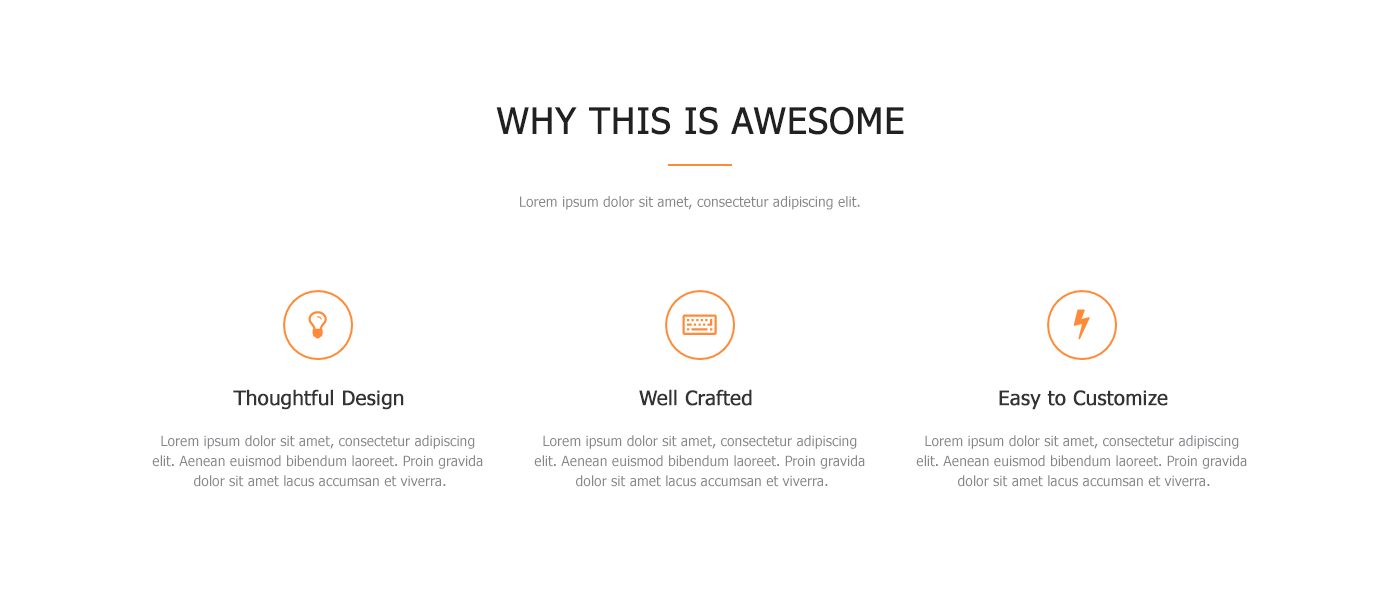
<style>
.page{position:relative;width:1400px;height:592px;background:#ffffff}
.page>*{position:absolute;margin:0}
.t1{font:36px "Tahoma";color:#212121;font-weight:bold}
.t2{font:14px "Tahoma";color:#86878b}
.t3{font:20px "Tahoma";color:#333333;font-weight:bold}
.t4{font:14px/20px "Tahoma";color:#86878b}
</style>
<div class="page">
<p class="t1" style="left:496px;top:106px;width:408px;height:29px">WHY THIS IS AWESOME</p>
<p class="t2" style="left:520px;top:196px;width:340px;height:14px">Lorem ipsum dolor sit amet, consectetur adipiscing elit.</p>
<p class="t3" style="left:233px;top:389px;width:171px;height:21px">Thoughtful Design</p>
<p class="t3" style="left:639px;top:389px;width:113px;height:17px">Well Crafted</p>
<p class="t3" style="left:999px;top:390px;width:169px;height:20px">Easy to Customize</p>
<p class="t4" style="left:152px;top:435px;width:331px;height:52px;text-align:center">Lorem ipsum dolor sit amet, consectetur adipiscing <br>elit. Aenean euismod bibendum laoreet. Proin gravida <br>dolor sit amet lacus accumsan et viverra.</p>
<p class="t4" style="left:534px;top:435px;width:331px;height:52px;text-align:center">Lorem ipsum dolor sit amet, consectetur adipiscing <br>elit. Aenean euismod bibendum laoreet. Proin gravida <br>dolor sit amet lacus accumsan et viverra.</p>
<p class="t4" style="left:916px;top:435px;width:331px;height:52px;text-align:center">Lorem ipsum dolor sit amet, consectetur adipiscing <br>elit. Aenean euismod bibendum laoreet. Proin gravida <br>dolor sit amet lacus accumsan et viverra.</p>
</div>
